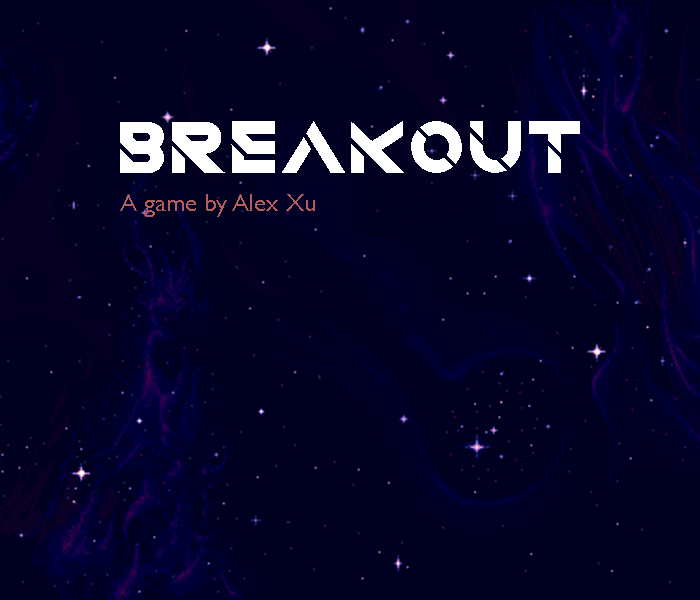
<style>
.page{position:relative;width:700px;height:600px;background:#000020}
.page>*{position:absolute;margin:0}
.t1{font:75px "QuantumRegular";color:#ffffff}
.t2{font:25px "GillSansMT";color:#b35d5d}
</style>
<div class="page">
<p class="t1" style="left:120px;top:121px;width:460px;height:52px">BREAKOUT</p>
<p class="t2" style="left:120px;top:194px;width:195px;height:23px">A game by Alex Xu</p>
</div>
